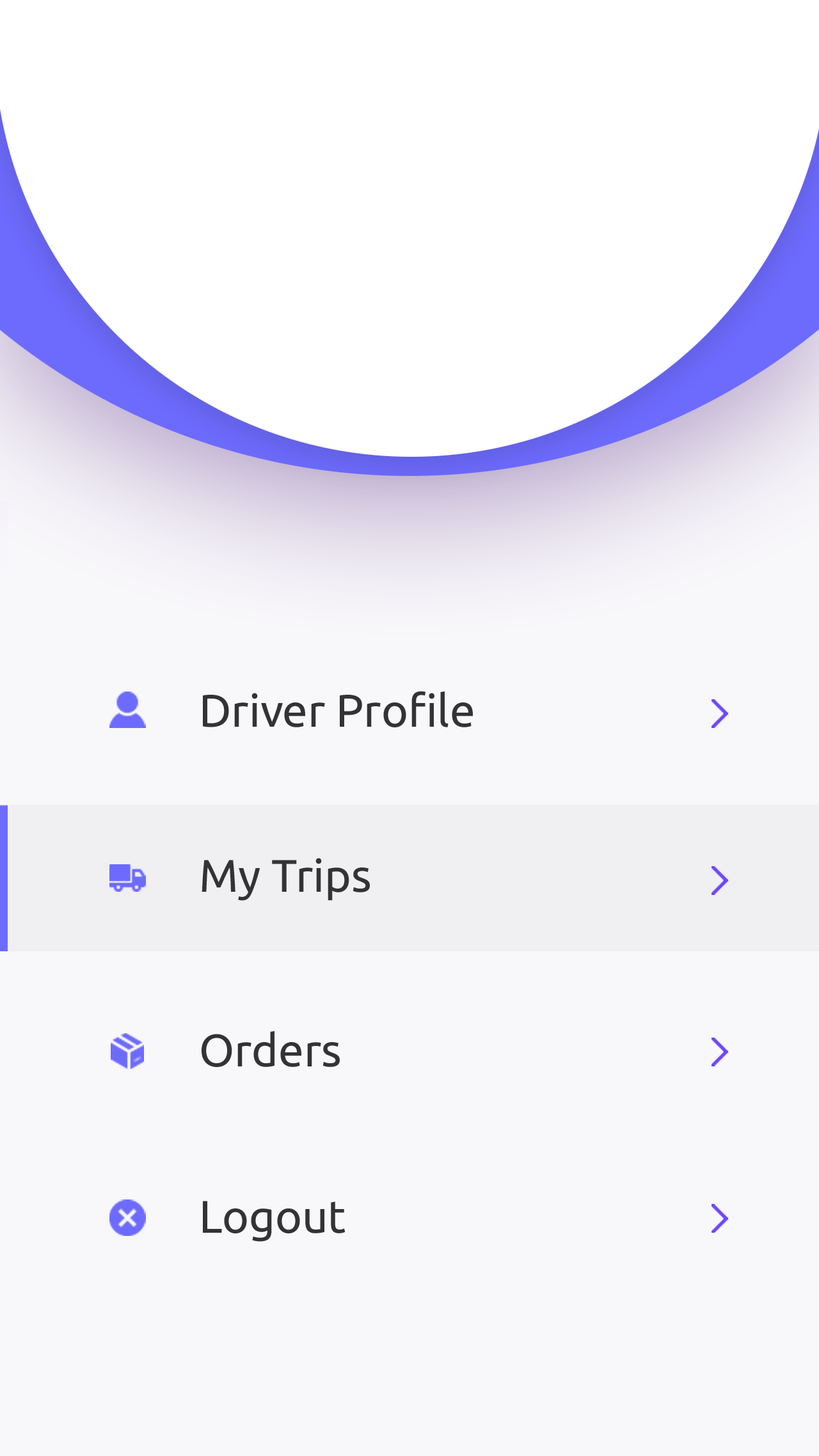
<style>
.page{position:relative;width:819px;height:1456px;background:#f8f7fa}
.page>*{position:absolute;margin:0}
.t1{font:45.5px "Ubuntu-Regular";color:#343334}
</style>
<div class="page">
<p class="t1" style="left:203px;top:691px;width:270px;height:36px">Driver Profile</p>
<p class="t1" style="left:202px;top:858px;width:168px;height:43px">My Trips</p>
<p class="t1" style="left:202px;top:1031px;width:138px;height:36px">Orders</p>
<p class="t1" style="left:203px;top:1201px;width:142px;height:41px">Logout</p>
</div>
